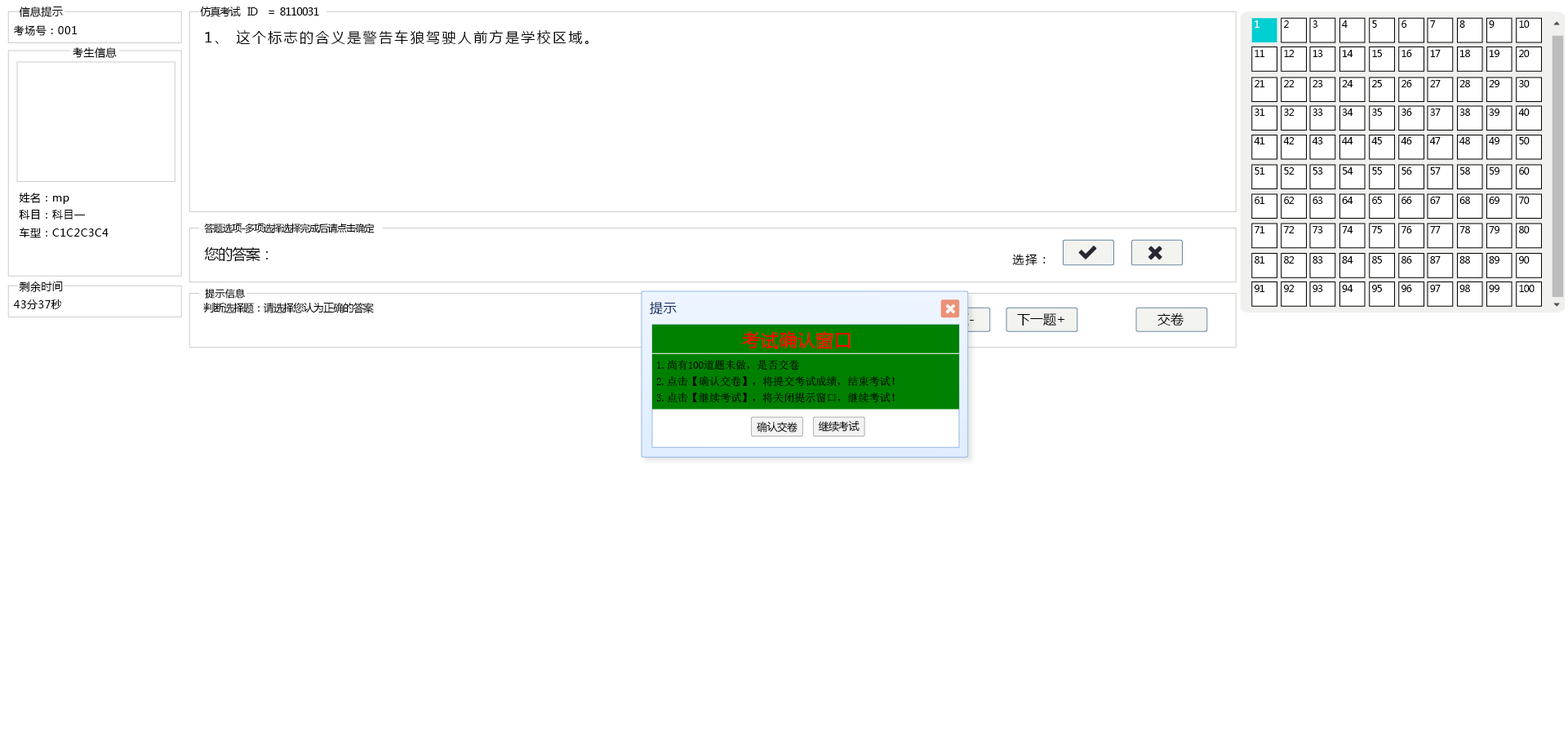
<style>
.page{position:relative;width:1568px;height:749px;background:#ffffff}
.page>*{position:absolute;margin:0}
.t1{font:10.6px "MicrosoftYaHei";letter-spacing:0.04em;color:#000000}
.t2{font:10.6px "MicrosoftYaHei";letter-spacing:-0.06em;color:#000000}
.t3{font:9.8px "MicrosoftYaHei";letter-spacing:-0.06em;color:#ffffff}
.t4{font:9.8px "MicrosoftYaHei";letter-spacing:-0.06em;color:#000000}
.t5{font:13.9px "MicrosoftYaHei";letter-spacing:0.14em;color:#000000}
.t6{font:10.6px/17.6px "MicrosoftYaHei";letter-spacing:0.04em;color:#000000}
.t7{font:14.7px "MicrosoftYaHei";letter-spacing:-0.06em;color:#000000}
.t8{font:11.4px "MicrosoftYaHei";letter-spacing:0.14em;color:#000000}
.t9{font:9.8px "MicrosoftYaHei";letter-spacing:0.02em;color:#000000}
.t10{font:13.1px "MicrosoftYaHei";letter-spacing:0.04em;color:#0d2d61}
.t11{font:13.1px "MicrosoftYaHei";color:#000000}
.t12{font:18px "MicrosoftYaHei";letter-spacing:0.02em;color:#ff0000}
.t13{font:10.9px/16.3px "SimSun";letter-spacing:-0.02em;color:#000000}
.t14{font:10.5px "MicrosoftYaHei";letter-spacing:-0.04em;color:#000000}
</style>
<div class="page">
<p class="t1" style="left:19px;top:7px;width:44px;height:10px">信息提示</p>
<p class="t2" style="left:200px;top:7px;width:119px;height:10px">仿真考试   ID    =  8110031</p>
<p class="t1" style="left:14px;top:25px;width:64px;height:11px">考场号：001</p>
<p class="t3" style="left:1255px;top:20px;width:4px;height:8px">1</p>
<p class="t4" style="left:1284px;top:20px;width:5px;height:8px">2</p>
<p class="t4" style="left:1313px;top:20px;width:4px;height:8px">3</p>
<p class="t4" style="left:1342px;top:20px;width:6px;height:8px">4</p>
<p class="t4" style="left:1372px;top:20px;width:5px;height:8px">5</p>
<p class="t4" style="left:1401px;top:20px;width:6px;height:8px">6</p>
<p class="t4" style="left:1430px;top:20px;width:6px;height:8px">7</p>
<p class="t4" style="left:1459px;top:20px;width:6px;height:8px">8</p>
<p class="t4" style="left:1489px;top:20px;width:6px;height:8px">9</p>
<p class="t4" style="left:1519px;top:20px;width:11px;height:8px">10</p>
<p class="t5" style="left:205px;top:30px;width:384px;height:15px">1、 这个标志的含义是警告车狼驾驶人前方是学校区域。</p>
<p class="t1" style="left:73px;top:47px;width:44px;height:11px">考生信息</p>
<p class="t4" style="left:1255px;top:50px;width:10px;height:7px">11</p>
<p class="t4" style="left:1284px;top:50px;width:11px;height:7px">12</p>
<p class="t4" style="left:1313px;top:50px;width:10px;height:7px">13</p>
<p class="t4" style="left:1342px;top:50px;width:11px;height:7px">14</p>
<p class="t4" style="left:1372px;top:50px;width:10px;height:7px">15</p>
<p class="t4" style="left:1401px;top:50px;width:11px;height:7px">16</p>
<p class="t4" style="left:1430px;top:50px;width:11px;height:7px">17</p>
<p class="t4" style="left:1459px;top:50px;width:11px;height:7px">18</p>
<p class="t4" style="left:1489px;top:50px;width:10px;height:7px">19</p>
<p class="t4" style="left:1519px;top:50px;width:11px;height:7px">20</p>
<p class="t4" style="left:1255px;top:80px;width:10px;height:7px">21</p>
<p class="t4" style="left:1284px;top:80px;width:11px;height:7px">22</p>
<p class="t4" style="left:1313px;top:80px;width:10px;height:7px">23</p>
<p class="t4" style="left:1342px;top:80px;width:11px;height:7px">24</p>
<p class="t4" style="left:1372px;top:80px;width:10px;height:7px">25</p>
<p class="t4" style="left:1401px;top:80px;width:11px;height:7px">26</p>
<p class="t4" style="left:1430px;top:80px;width:11px;height:7px">27</p>
<p class="t4" style="left:1459px;top:80px;width:11px;height:7px">28</p>
<p class="t4" style="left:1489px;top:80px;width:10px;height:7px">29</p>
<p class="t4" style="left:1519px;top:80px;width:11px;height:7px">30</p>
<p class="t4" style="left:1255px;top:109px;width:10px;height:7px">31</p>
<p class="t4" style="left:1284px;top:109px;width:11px;height:7px">32</p>
<p class="t4" style="left:1313px;top:109px;width:10px;height:7px">33</p>
<p class="t4" style="left:1342px;top:109px;width:11px;height:7px">34</p>
<p class="t4" style="left:1372px;top:109px;width:10px;height:7px">35</p>
<p class="t4" style="left:1401px;top:109px;width:11px;height:7px">36</p>
<p class="t4" style="left:1430px;top:109px;width:11px;height:7px">37</p>
<p class="t4" style="left:1459px;top:109px;width:11px;height:7px">38</p>
<p class="t4" style="left:1489px;top:109px;width:10px;height:7px">39</p>
<p class="t4" style="left:1518px;top:109px;width:12px;height:7px">40</p>
<p class="t4" style="left:1254px;top:137px;width:11px;height:7px">41</p>
<p class="t4" style="left:1283px;top:137px;width:12px;height:7px">42</p>
<p class="t4" style="left:1312px;top:137px;width:11px;height:7px">43</p>
<p class="t4" style="left:1342px;top:137px;width:11px;height:7px">44</p>
<p class="t4" style="left:1371px;top:137px;width:11px;height:7px">45</p>
<p class="t4" style="left:1401px;top:137px;width:11px;height:7px">46</p>
<p class="t4" style="left:1429px;top:137px;width:12px;height:7px">47</p>
<p class="t4" style="left:1459px;top:137px;width:11px;height:7px">48</p>
<p class="t4" style="left:1489px;top:137px;width:10px;height:7px">49</p>
<p class="t4" style="left:1519px;top:137px;width:11px;height:7px">50</p>
<p class="t4" style="left:1255px;top:167px;width:10px;height:8px">51</p>
<p class="t4" style="left:1284px;top:167px;width:11px;height:8px">52</p>
<p class="t4" style="left:1313px;top:167px;width:10px;height:8px">53</p>
<p class="t4" style="left:1342px;top:167px;width:11px;height:8px">54</p>
<p class="t4" style="left:1372px;top:167px;width:10px;height:8px">55</p>
<p class="t4" style="left:1401px;top:167px;width:11px;height:8px">56</p>
<p class="t4" style="left:1430px;top:167px;width:11px;height:8px">57</p>
<p class="t4" style="left:1459px;top:167px;width:11px;height:8px">58</p>
<p class="t4" style="left:1489px;top:167px;width:10px;height:8px">59</p>
<p class="t4" style="left:1519px;top:167px;width:11px;height:8px">60</p>
<p class="t6" style="left:19px;top:193px;width:90px;height:45px">姓名：mp<br>科目：科目一<br>车型：C1C2C3C4</p>
<p class="t4" style="left:1255px;top:197px;width:10px;height:7px">61</p>
<p class="t4" style="left:1284px;top:197px;width:11px;height:7px">62</p>
<p class="t4" style="left:1313px;top:197px;width:10px;height:7px">63</p>
<p class="t4" style="left:1342px;top:197px;width:11px;height:7px">64</p>
<p class="t4" style="left:1372px;top:197px;width:10px;height:7px">65</p>
<p class="t4" style="left:1401px;top:197px;width:11px;height:7px">66</p>
<p class="t4" style="left:1430px;top:197px;width:11px;height:7px">67</p>
<p class="t4" style="left:1459px;top:197px;width:11px;height:7px">68</p>
<p class="t4" style="left:1489px;top:197px;width:10px;height:7px">69</p>
<p class="t4" style="left:1518px;top:197px;width:12px;height:7px">70</p>
<p class="t4" style="left:204px;top:223px;width:171px;height:10px">答题选项-多项选择选择完成后请点击确定</p>
<p class="t4" style="left:1254px;top:226px;width:11px;height:7px">71</p>
<p class="t4" style="left:1283px;top:226px;width:12px;height:7px">72</p>
<p class="t4" style="left:1313px;top:226px;width:10px;height:7px">73</p>
<p class="t4" style="left:1342px;top:226px;width:11px;height:7px">74</p>
<p class="t4" style="left:1371px;top:226px;width:11px;height:7px">75</p>
<p class="t4" style="left:1401px;top:226px;width:11px;height:7px">76</p>
<p class="t4" style="left:1430px;top:226px;width:11px;height:7px">77</p>
<p class="t4" style="left:1459px;top:226px;width:11px;height:7px">78</p>
<p class="t4" style="left:1489px;top:226px;width:10px;height:7px">79</p>
<p class="t4" style="left:1519px;top:226px;width:11px;height:7px">80</p>
<p class="t7" style="left:204px;top:247px;width:65px;height:15px">您的答案：</p>
<p class="t8" style="left:1012px;top:254px;width:34px;height:11px">选择：</p>
<p class="t4" style="left:1255px;top:256px;width:10px;height:8px">81</p>
<p class="t4" style="left:1284px;top:256px;width:11px;height:8px">82</p>
<p class="t4" style="left:1313px;top:256px;width:10px;height:8px">83</p>
<p class="t4" style="left:1342px;top:256px;width:11px;height:8px">84</p>
<p class="t4" style="left:1372px;top:256px;width:10px;height:8px">85</p>
<p class="t4" style="left:1401px;top:256px;width:11px;height:8px">86</p>
<p class="t4" style="left:1430px;top:256px;width:11px;height:8px">87</p>
<p class="t4" style="left:1459px;top:256px;width:11px;height:8px">88</p>
<p class="t4" style="left:1489px;top:256px;width:10px;height:8px">89</p>
<p class="t4" style="left:1519px;top:256px;width:11px;height:8px">90</p>
<p class="t1" style="left:19px;top:282px;width:44px;height:10px">剩余时间</p>
<p class="t9" style="left:205px;top:288px;width:40px;height:11px">提示信息</p>
<p class="t4" style="left:1255px;top:285px;width:10px;height:7px">91</p>
<p class="t4" style="left:1284px;top:285px;width:11px;height:7px">92</p>
<p class="t4" style="left:1313px;top:285px;width:10px;height:7px">93</p>
<p class="t4" style="left:1342px;top:285px;width:11px;height:7px">94</p>
<p class="t4" style="left:1372px;top:285px;width:10px;height:7px">95</p>
<p class="t4" style="left:1401px;top:285px;width:11px;height:7px">96</p>
<p class="t4" style="left:1430px;top:285px;width:11px;height:7px">97</p>
<p class="t4" style="left:1459px;top:285px;width:11px;height:7px">98</p>
<p class="t4" style="left:1489px;top:285px;width:10px;height:7px">99</p>
<p class="t4" style="left:1519px;top:285px;width:16px;height:7px">100</p>
<p class="t1" style="left:13px;top:300px;width:49px;height:9px">43分37秒</p>
<p class="t2" style="left:203px;top:302px;width:171px;height:11px">判断选择题：请选择您认为正确的答案</p>
<p class="t10" style="left:650px;top:302px;width:27px;height:13px">提示</p>
<p class="t11" style="left:1017px;top:313px;width:48px;height:13px">下一题+</p>
<p class="t11" style="left:1157px;top:313px;width:27px;height:13px">交卷</p>
<p class="t12" style="left:742px;top:331px;width:109px;height:18px">考试确认窗口</p>
<p class="t13" style="left:656px;top:360px;width:239px;height:43px">1.尚有100道题未做，是否交卷<br>2.点击【确认交卷】，将提交考试成绩，结束考试！<br>3.点击【继续考试】，将关闭提示窗口，继续考试！</p>
<p class="t14" style="left:757px;top:422px;width:40px;height:11px">确认交卷</p>
<p class="t14" style="left:818px;top:421px;width:42px;height:11px">继续考试</p>
</div>
